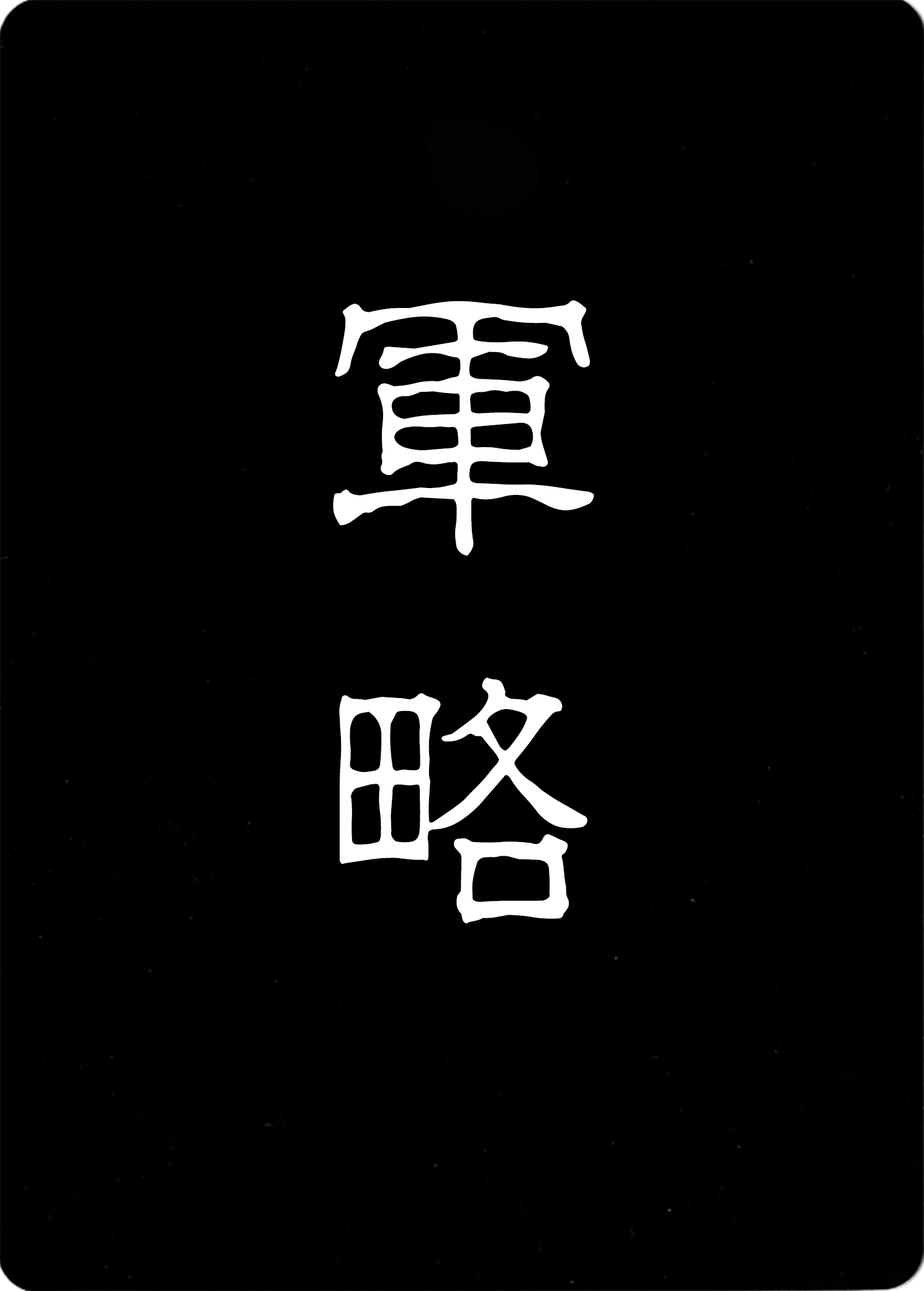
<style>
.page{position:relative;width:924px;height:1291px;background:#000000}
.page>*{position:absolute;margin:0}
.t1{font:310.4px "¾­µä·±½ÇÁ¥ Regular";letter-spacing:0.2em;color:#ffffff}
</style>
<div class="page">
<p class="t1" style="left:333px;top:300px;width:261px;height:623px;text-align:center">军略</p>
</div>
